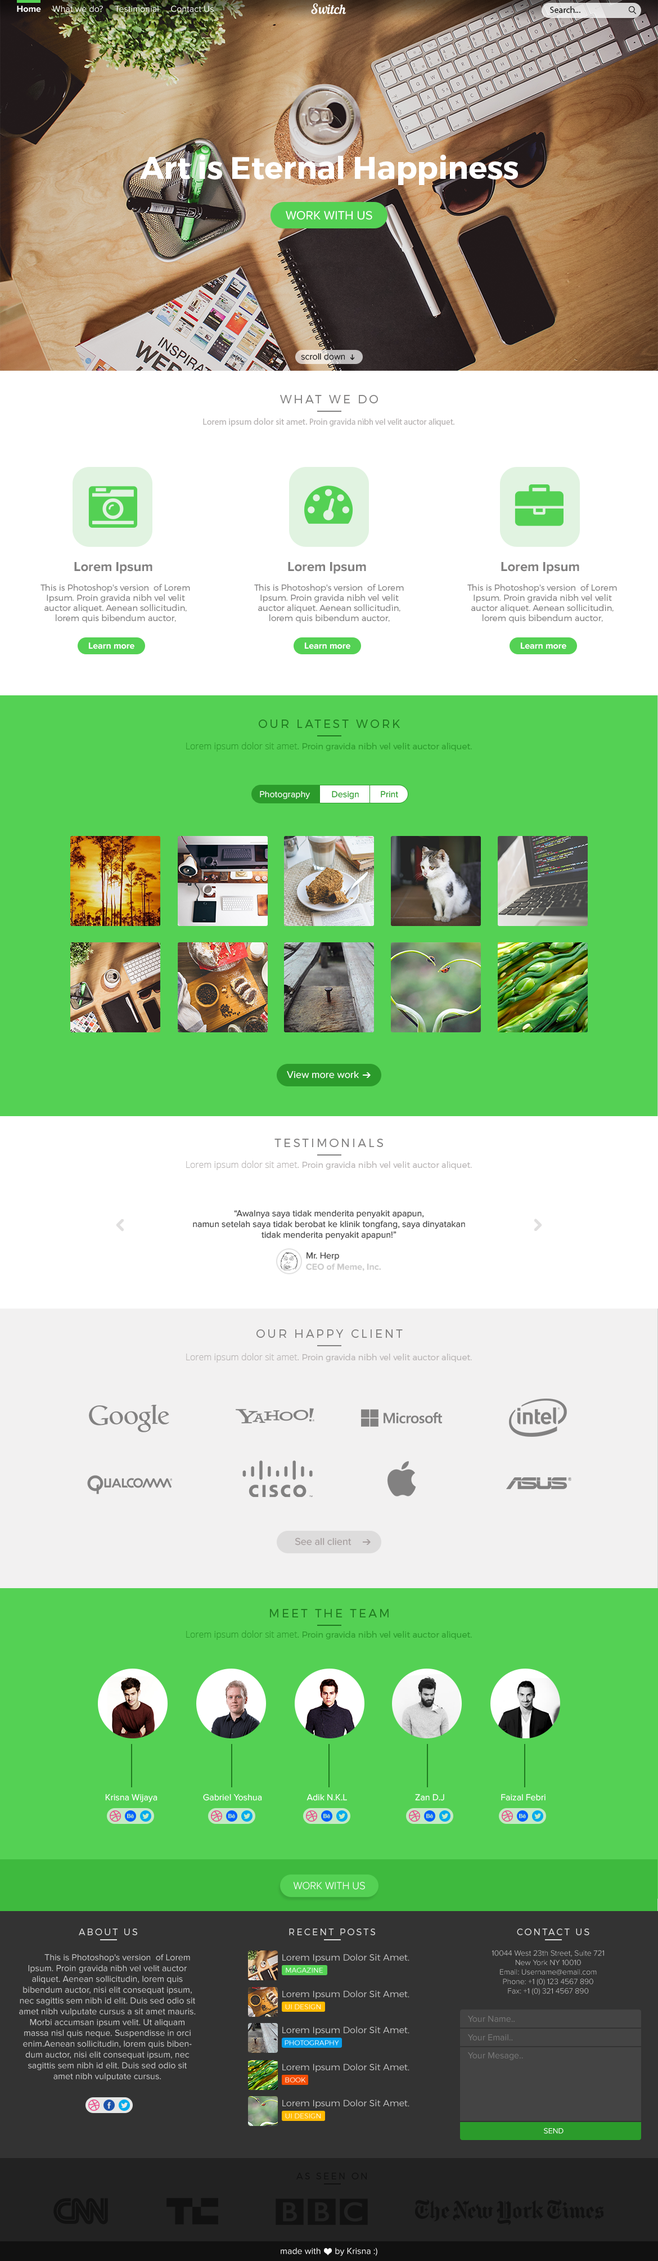
<style>
.page{position:relative;width:658px;height:2261px;background:#54d154}
.page>*{position:absolute;margin:0}
.t1{font:9px "ProximaNova-Regular";color:#ffffff}
.t2{font:9px "ProximaNova-Bold";color:#ffffff}
.t3{font:13.5px "NautilusPompilius";color:#ffffff}
.t4{font:9px "MyriadPro-Regular";color:#111111}
.t5{font:30.9px "Montserrat-Bold";color:#ffffff}
.t6{font:12.3px "ProximaNova-Regular";color:#ffffff}
.t7{font:9px "ProximaNova-Light";color:#111111}
.t8{font:11.6px "Montserrat-Light";letter-spacing:0.2em;color:#828181}
.t9{font:8.4px "MyriadPro-Regular";color:#b7b3b3}
.t10{font:9px "MyriadPro-Regular";color:#b7b3b3}
.t11{font:13.5px "ProximaNova-Bold";color:#828181}
.t12{font:8.4px "Montserrat-Light";color:#828181}
.t13{font:11.6px "Montserrat-Light";letter-spacing:0.2em;color:#207b20}
.t14{font:8.4px "Montserrat-Light";color:#2b9b2b}
.t15{font:9px "OpenSans-Light";color:#2b9b2b}
.t16{font:9px "ProximaNova-Regular";color:#2b9b2b}
.t17{font:10.1px "ProximaNova-Regular";color:#ffffff}
.t18{font:8.4px "Montserrat-Light";color:#b7b3b3}
.t19{font:9px "OpenSans-Light";color:#b7b3b3}
.t20{font:9px "ProximaNova-Regular";color:#444444}
.t21{font:9px "ProximaNova-Bold";color:#cccccc}
.t22{font:10.1px "ProximaNova-Regular";color:#a59d9d}
.t23{font:10.5px "ProximaNova-Light";color:#ffffff}
.t24{font:9px "Montserrat-Light";letter-spacing:0.2em;color:#dddddd}
.t25{font:7.9px "ProximaNova-Light";color:#cccccc}
.t26{font:9px "ProximaNova-Regular";color:#cccccc}
.t27{font:9px "Montserrat-Light";color:#cccccc}
.t28{font:7.1px "Montserrat-Light";color:#ffffff}
.t29{font:9px "ProximaNova-Regular";color:#777777}
.t30{font:7.9px "ProximaNova-Regular";color:#ffffff}
.t31{font:9px "Montserrat-Light";letter-spacing:0.2em;color:#101010}
</style>
<div class="page">
<p class="t1" style="left:17px;top:6px;width:197px;height:6px"><span class="t2">Home     </span>What we do?     Testimonial     Contact Us</p>
<p class="t3" style="left:311px;top:3px;width:35px;height:11px">Switch</p>
<p class="t4" style="left:550px;top:6px;width:30px;height:7px">Search...</p>
<p class="t5" style="left:140px;top:155px;width:378px;height:30px">Art is Eternal Happiness</p>
<p class="t6" style="left:286px;top:210px;width:86px;height:10px">WORK WITH US</p>
<p class="t7" style="left:301px;top:353px;width:44px;height:7px">scroll down</p>
<p class="t8" style="left:280px;top:395px;width:98px;height:8px">WHAT WE DO</p>
<p class="t9" style="left:203px;top:418px;width:251px;height:8px"><span class="t10">Lorem ipsum dolor sit amet. </span>Proin gravida nibh vel velit auctor aliquet.</p>
<p class="t11" style="left:74px;top:562px;width:78px;height:12px">Lorem Ipsum</p>
<p class="t11" style="left:288px;top:562px;width:78px;height:12px">Lorem Ipsum</p>
<p class="t11" style="left:501px;top:562px;width:78px;height:12px">Lorem Ipsum</p>
<p class="t12" style="left:40px;top:584px;width:150px;height:39px;text-align:center">This is Photoshop's version  of Lorem Ipsum. Proin gravida nibh vel velit auctor aliquet. Aenean sollicitudin, lorem quis bibendum auctor,</p>
<p class="t12" style="left:254px;top:584px;width:150px;height:39px;text-align:center">This is Photoshop's version  of Lorem Ipsum. Proin gravida nibh vel velit auctor aliquet. Aenean sollicitudin, lorem quis bibendum auctor,</p>
<p class="t12" style="left:467px;top:584px;width:150px;height:39px;text-align:center">This is Photoshop's version  of Lorem Ipsum. Proin gravida nibh vel velit auctor aliquet. Aenean sollicitudin, lorem quis bibendum auctor,</p>
<p class="t2" style="left:88px;top:642px;width:46px;height:7px">Learn more</p>
<p class="t2" style="left:304px;top:642px;width:46px;height:7px">Learn more</p>
<p class="t2" style="left:520px;top:642px;width:46px;height:7px">Learn more</p>
<p class="t13" style="left:259px;top:719px;width:141px;height:9px">OUR LATEST WORK</p>
<p class="t14" style="left:186px;top:742px;width:286px;height:10px"><span class="t15">Lorem ipsum dolor sit amet. </span>Proin gravida nibh vel velit auctor aliquet.</p>
<p class="t1" style="left:260px;top:791px;width:50px;height:8px">Photography</p>
<p class="t16" style="left:332px;top:791px;width:27px;height:8px">Design</p>
<p class="t16" style="left:381px;top:791px;width:17px;height:7px">Print</p>
<p class="t17" style="left:287px;top:1070px;width:72px;height:8px">View more work</p>
<p class="t8" style="left:274px;top:1138px;width:109px;height:9px">TESTIMONIALS</p>
<p class="t18" style="left:186px;top:1160px;width:286px;height:10px"><span class="t19">Lorem ipsum dolor sit amet. </span>Proin gravida nibh vel velit auctor aliquet.</p>
<p class="t20" style="left:193px;top:1210px;width:272px;height:30px;text-align:center">“Awalnya saya tidak menderita penyakit apapun,<br>namun setelah saya tidak berobat ke klinik tongfang, saya dinyatakan<br>tidak menderita penyakit apapun!”</p>
<p class="t20" style="left:307px;top:1252px;width:32px;height:9px">Mr. Herp</p>
<p class="t21" style="left:306px;top:1263px;width:75px;height:8px">CEO of Meme, Inc.</p>
<p class="t8" style="left:256px;top:1329px;width:147px;height:9px">OUR HAPPY CLIENT</p>
<p class="t18" style="left:186px;top:1353px;width:286px;height:9px"><span class="t19">Lorem ipsum dolor sit amet. </span>Proin gravida nibh vel velit auctor aliquet.</p>
<p class="t22" style="left:295px;top:1537px;width:57px;height:8px">See all client</p>
<p class="t13" style="left:270px;top:1609px;width:119px;height:8px">MEET THE TEAM</p>
<p class="t14" style="left:186px;top:1630px;width:286px;height:10px"><span class="t15">Lorem ipsum dolor sit amet. </span>Proin gravida nibh vel velit auctor aliquet.</p>
<p class="t1" style="left:105px;top:1794px;width:53px;height:8px">Krisna Wijaya</p>
<p class="t1" style="left:203px;top:1794px;width:59px;height:7px">Gabriel Yoshua</p>
<p class="t1" style="left:307px;top:1794px;width:40px;height:7px">Adik N.K.L</p>
<p class="t1" style="left:415px;top:1794px;width:29px;height:7px">Zan D.J</p>
<p class="t1" style="left:501px;top:1794px;width:45px;height:7px">Faizal Febri</p>
<p class="t23" style="left:293px;top:1882px;width:72px;height:7px">WORK WITH US</p>
<p class="t24" style="left:79px;top:1928px;width:58px;height:7px">ABOUT US</p>
<p class="t24" style="left:289px;top:1928px;width:86px;height:7px">RECENT POSTS</p>
<p class="t24" style="left:517px;top:1928px;width:73px;height:7px">CONTACT US</p>
<p class="t25" style="left:492px;top:1950px;width:112px;height:45px;text-align:center">10044 West 23th Street, Suite 721<br>New York NY 10010<br>Email: Username@email.com<br>Phone: +1 (0) 123 4567 890<br>Fax: +1 (0) 321 4567 890</p>
<p class="t26" style="left:19px;top:1954px;width:177px;height:127px;text-align:center">This is Photoshop's version  of Lorem Ipsum. Proin gravida nibh vel velit auctor aliquet. Aenean sollicitudin, lorem quis bibendum auctor, nisi elit consequat ipsum, nec sagittis sem nibh id elit. Duis sed odio sit amet nibh vulputate cursus a sit amet mauris. Morbi accumsan ipsum velit. Ut aliquam massa nisl quis neque. Suspendisse in orci enim.Aenean sollicitudin, lorem quis bibendum auctor, nisi elit consequat ipsum, nec sagittis sem nibh id elit. Duis sed odio sit amet nibh vulputate cursus.</p>
<p class="t27" style="left:282px;top:1954px;width:128px;height:8px">Lorem Ipsum Dolor Sit Amet.</p>
<p class="t28" style="left:286px;top:1967px;width:37px;height:6px">MAGAZINE</p>
<p class="t27" style="left:282px;top:1990px;width:128px;height:9px">Lorem Ipsum Dolor Sit Amet.</p>
<p class="t28" style="left:285px;top:2004px;width:36px;height:5px">UI DESIGN</p>
<p class="t29" style="left:468px;top:2015px;width:47px;height:7px">Your Name..</p>
<p class="t27" style="left:282px;top:2026px;width:128px;height:9px">Lorem Ipsum Dolor Sit Amet.</p>
<p class="t28" style="left:285px;top:2040px;width:54px;height:5px">PHOTOGRAPHY</p>
<p class="t29" style="left:468px;top:2034px;width:45px;height:6px">Your Email..</p>
<p class="t29" style="left:468px;top:2052px;width:55px;height:8px">Your Mesage..</p>
<p class="t27" style="left:282px;top:2063px;width:128px;height:9px">Lorem Ipsum Dolor Sit Amet.</p>
<p class="t28" style="left:285px;top:2077px;width:21px;height:5px">BOOK</p>
<p class="t27" style="left:282px;top:2099px;width:128px;height:9px">Lorem Ipsum Dolor Sit Amet.</p>
<p class="t28" style="left:285px;top:2113px;width:36px;height:5px">UI DESIGN</p>
<p class="t30" style="left:544px;top:2127px;width:20px;height:7px">SEND</p>
<p class="t31" style="left:296px;top:2172px;width:71px;height:7px">AS SEEN ON</p>
<p class="t1" style="left:281px;top:2247px;width:96px;height:9px">made with      by Krisna :)</p>
</div>
